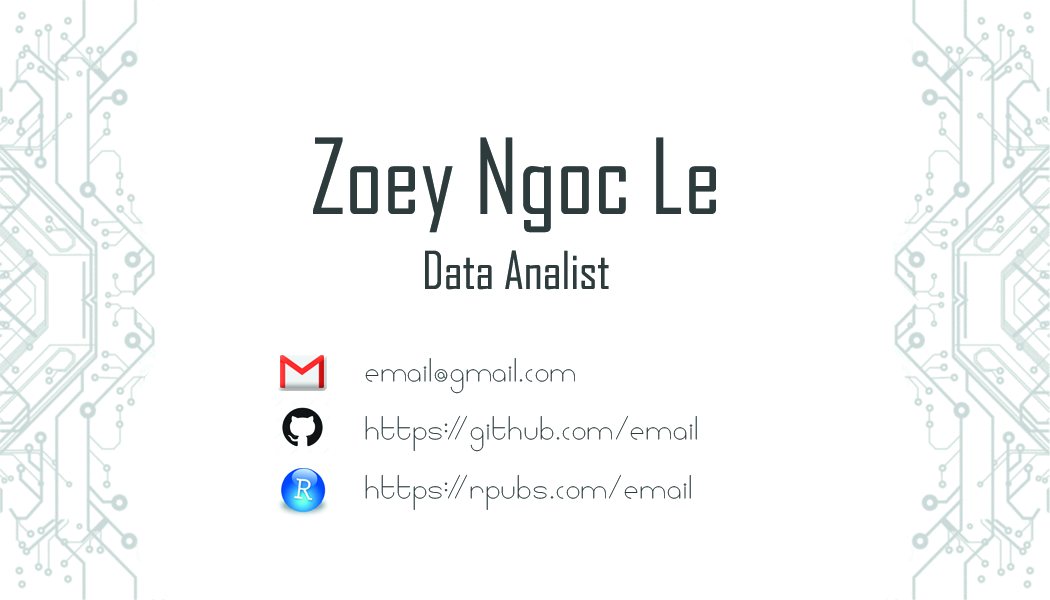
<style>
.page{position:relative;width:1050px;height:600px;background:#ffffff}
.page>*{position:absolute;margin:0}
.t1{font:100px/75px "AgencyFB-Reg";color:#2e3b3c}
.t2{font:50px/75px "AgencyFB-Reg";color:#2e3b3c}
.t3{font:41.7px/58.3px "Linlegreyregular";color:#2e3b3c}
</style>
<div class="page">
<p class="t1" style="left:313px;top:137px;width:403px;height:153px;text-align:center">Zoey Ngoc Le<br><span class="t2">Data Analist</span></p>
<p class="t3" style="left:365px;top:358px;width:332px;height:152px">email@gmail.com<br>https://github.com/email<br>https://rpubs.com/email</p>
</div>
